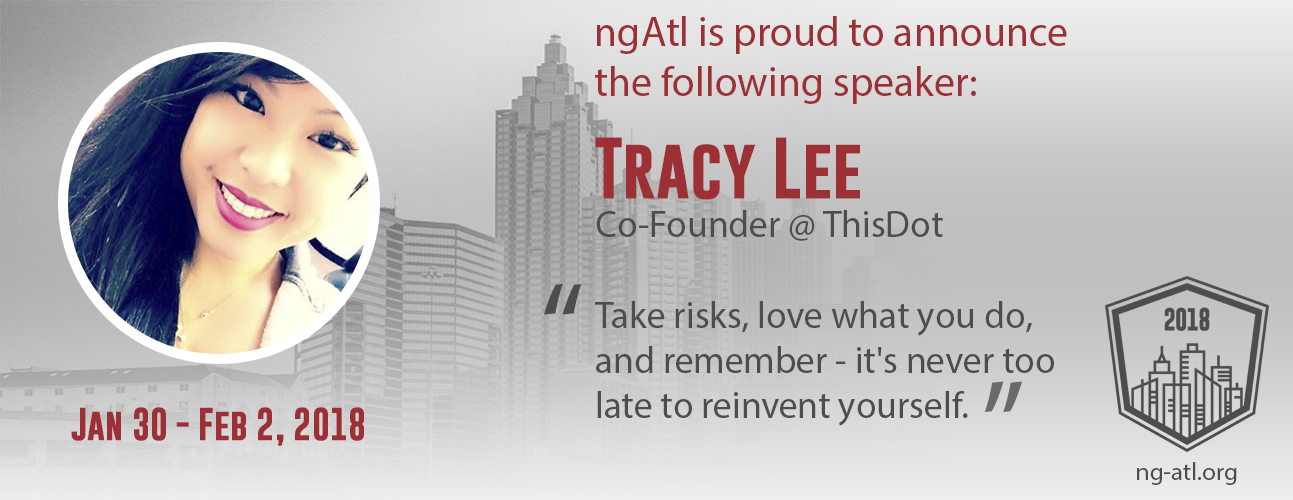
<style>
.page{position:relative;width:1293px;height:500px}
.page>*{position:absolute;margin:0}
.t1{font:41.7px "MyriadPro-Regular";color:#9d3035}
.t2{font:62.5px "GoboldBold";color:#9d3035}
.t3{font:37.5px "MyriadPro-Regular";color:#4d4d4e}
.t4{font:125px "MyriadPro-Regular";color:#4d4d4e}
.t5{font:125px "MyriadPro-Regular";color:#6a6a6b}
.t6{font:33.3px "GoboldBold";color:#9d3035}
.t7{font:25px "MyriadPro-Regular";color:#4d4d4e}
</style>
<div class="page">
<p class="t1" style="left:595px;top:16px;width:472px;height:88px">ngAtl is proud to announce the following speaker:</p>
<p class="t2" style="left:595px;top:137px;width:265px;height:63px">Tracy Lee</p>
<p class="t3" style="left:596px;top:210px;width:347px;height:31px">Co-Founder @ ThisDot</p>
<p class="t4" style="left:544px;top:283px;width:38px;height:32px">“</p>
<p class="t3" style="left:595px;top:301px;width:459px;height:125px">Take risks, love what you do, and remember - it's never too late to reinvent yourself.</p>
<p class="t5" style="left:984px;top:381px;width:38px;height:32px;rotate:180deg">“</p>
<p class="t6" style="left:71px;top:407px;width:293px;height:39px">Jan 30 - Feb 2, 2018</p>
<p class="t7" style="left:1137px;top:462px;width:100px;height:23px">ng-atl.org</p>
</div>
